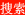
<style>
.page{position:relative;width:25px;height:15px;background:#ff1600}
.page>*{position:absolute;margin:0}
.t1{font:12.9px "SimSun"}
</style>
<div class="page">
<p class="t1" style="left:0px;top:2px;width:25px;height:13px">搜索</p>
</div>
